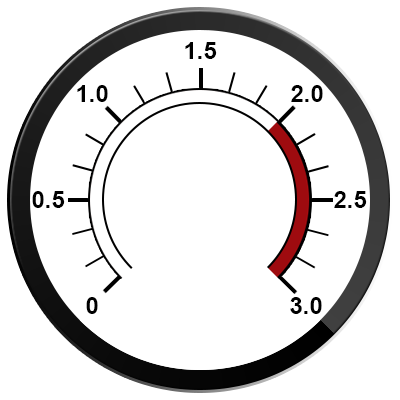
<style>
.page{position:relative;width:400px;height:400px;background:#ffffff}
.page>*{position:absolute;margin:0}
.t1{font:24px "Arial-BoldMT";color:#000000}
</style>
<div class="page">
<p class="t1" style="left:185px;top:42px;width:32px;height:17px">1.5</p>
<p class="t1" style="left:77px;top:85px;width:31px;height:17px">1.0</p>
<p class="t1" style="left:291px;top:85px;width:32px;height:17px">2.0</p>
<p class="t1" style="left:32px;top:191px;width:33px;height:17px">0.5</p>
<p class="t1" style="left:334px;top:191px;width:33px;height:17px">2.5</p>
<p class="t1" style="left:86px;top:297px;width:12px;height:17px">0</p>
<p class="t1" style="left:290px;top:297px;width:32px;height:17px">3.0</p>
</div>
